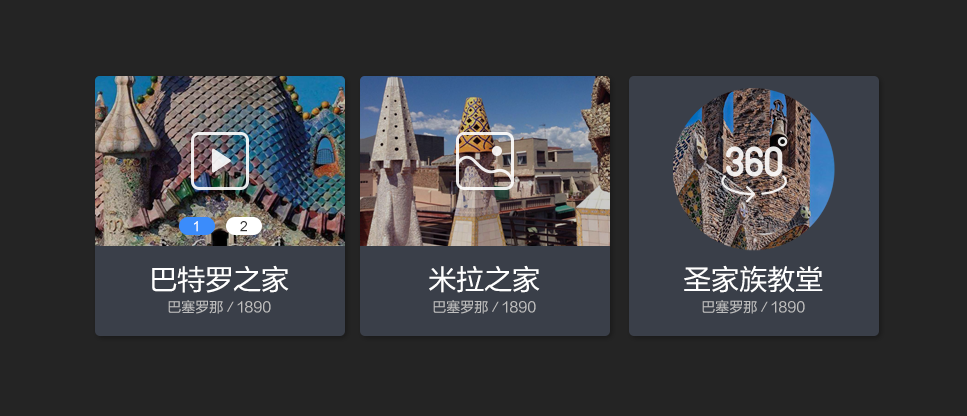
<style>
.page{position:relative;width:967px;height:416px;background:#242424}
.page>*{position:absolute;margin:0}
.t1{font:14.5px "ArialMT";color:#ffffff}
.t2{font:14.5px "ArialMT";color:#333333}
.t3{font:28px "FZLTHJW--GB1-0";color:#ffffff}
.t4{font:14px "FZLTHJW--GB1-0";color:#bebebe}
</style>
<div class="page">
<p class="t1" style="left:194px;top:221px;width:4px;height:11px">1</p>
<p class="t2" style="left:240px;top:221px;width:7px;height:11px">2</p>
<p class="t3" style="left:152px;top:265px;width:137px;height:28px">巴特罗之家</p>
<p class="t3" style="left:429px;top:265px;width:111px;height:28px">米拉之家</p>
<p class="t3" style="left:684px;top:265px;width:139px;height:28px">圣家族教堂</p>
<p class="t4" style="left:168px;top:300px;width:103px;height:14px">巴塞罗那／1890</p>
<p class="t4" style="left:433px;top:300px;width:103px;height:14px">巴塞罗那／1890</p>
<p class="t4" style="left:702px;top:300px;width:103px;height:14px">巴塞罗那／1890</p>
</div>
